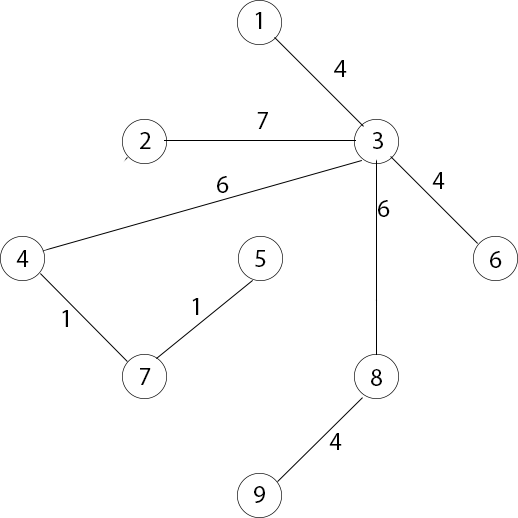
<style>
.page{position:relative;width:518px;height:518px;background:#ffffff}
.page>*{position:absolute;margin:0}
.t1{font:25px "MyriadPro-Regular";color:#000000}
</style>
<div class="page">
<p class="t1" style="left:255px;top:12px;width:7px;height:17px">1</p>
<p class="t1" style="left:334px;top:60px;width:13px;height:17px">4</p>
<p class="t1" style="left:257px;top:112px;width:11px;height:17px">7</p>
<p class="t1" style="left:140px;top:132px;width:11px;height:17px">2</p>
<p class="t1" style="left:373px;top:132px;width:10px;height:17px">3</p>
<p class="t1" style="left:432px;top:172px;width:13px;height:17px">4</p>
<p class="t1" style="left:217px;top:176px;width:12px;height:17px">6</p>
<p class="t1" style="left:378px;top:200px;width:12px;height:17px">6</p>
<p class="t1" style="left:16px;top:250px;width:13px;height:17px">4</p>
<p class="t1" style="left:255px;top:250px;width:11px;height:17px">5</p>
<p class="t1" style="left:490px;top:251px;width:12px;height:17px">6</p>
<p class="t1" style="left:192px;top:298px;width:7px;height:17px">1</p>
<p class="t1" style="left:62px;top:310px;width:6px;height:17px">1</p>
<p class="t1" style="left:140px;top:368px;width:11px;height:17px">7</p>
<p class="t1" style="left:371px;top:369px;width:11px;height:17px">8</p>
<p class="t1" style="left:329px;top:433px;width:13px;height:17px">4</p>
<p class="t1" style="left:254px;top:486px;width:11px;height:17px">9</p>
</div>
